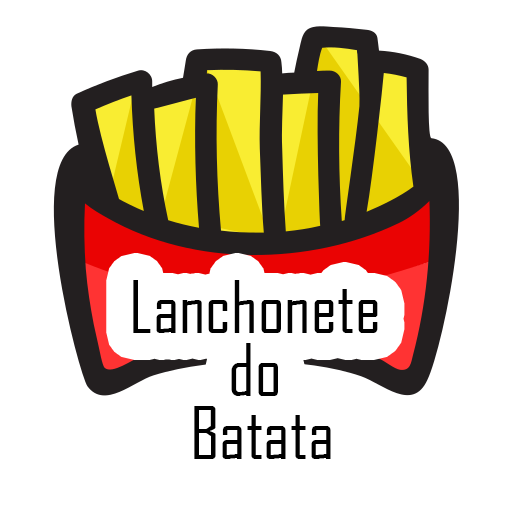
<style>
.page{position:relative;width:512px;height:512px;background:#ffffff}
.page>*{position:absolute;margin:0}
.t1{font:70px/63px "AgencyFB-Reg";color:#000000}
</style>
<div class="page">
<p class="t1" style="left:133px;top:280px;width:245px;height:179px;text-align:center">Lanchonete <br>do <br>Batata</p>
</div>
